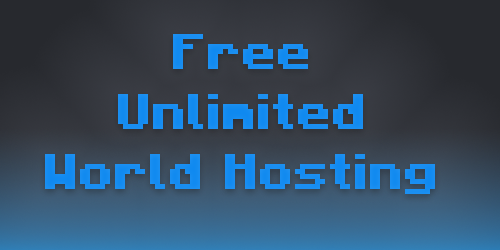
<style>
.page{position:relative;width:500px;height:250px}
.page>*{position:absolute;margin:0}
.t1{font:50px "Minecraft-Bold";color:#178df1}
</style>
<div class="page">
<p class="t1" style="left:45px;top:34px;width:390px;height:160px;text-align:center">Free<br>Unlimited<br>World Hosting</p>
</div>
